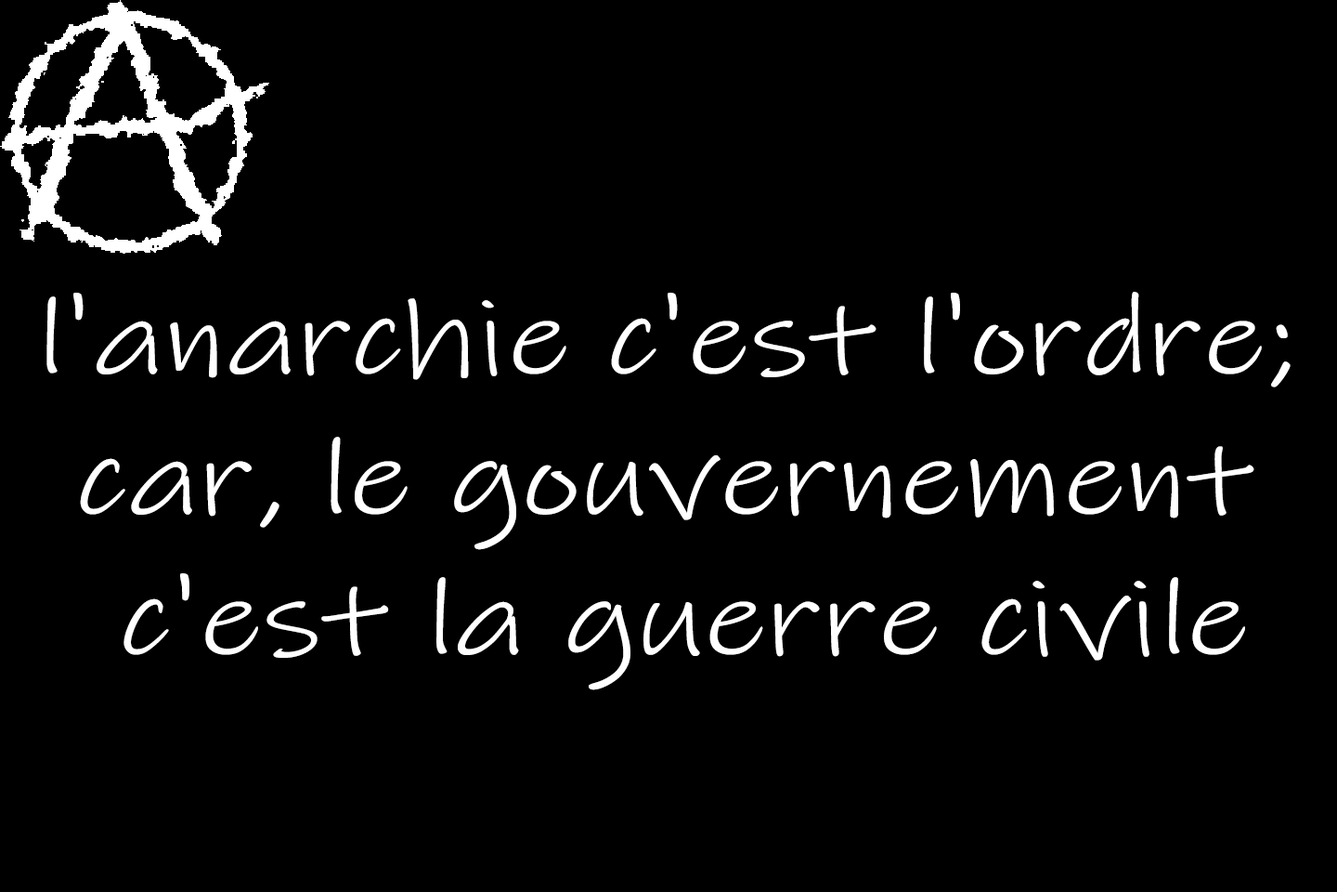
<style>
.page{position:relative;width:1337px;height:892px;background:#000000}
.page>*{position:absolute;margin:0}
.t1{font:107.7px/140.2px "InkFree";color:#ffffff;scale:1.25 1}
</style>
<div class="page">
<p class="t1" style="left:46px;top:292px;width:1245px;height:398px;text-align:center">l'anarchie c'est l'ordre; <br>car, le gouvernement <br>c'est la guerre civile</p>
</div>
